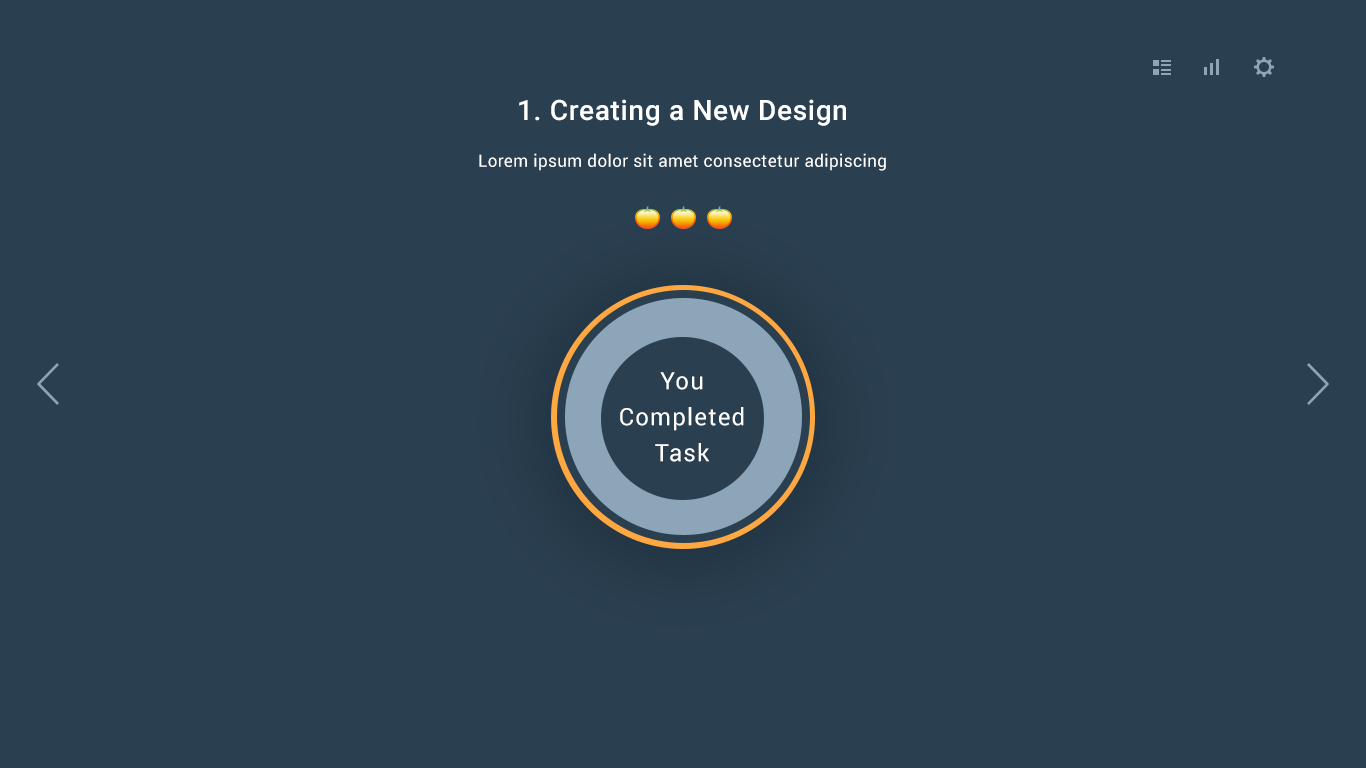
<style>
.page{position:relative;width:1366px;height:768px;background:#2a3f50}
.page>*{position:absolute;margin:0}
.t1{font:28px "Roboto-Medium";letter-spacing:0.025em;color:#ffffff}
.t2{font:17px "Roboto-Regular";letter-spacing:0.025em;color:#ffffff}
.t3{font:24px/36px "Roboto-Regular";letter-spacing:0.05em;color:#ffffff}
</style>
<div class="page">
<p class="t1" style="left:519px;top:99px;width:327px;height:27px">1. Creating a New Design</p>
<p class="t2" style="left:479px;top:153px;width:407px;height:18px">Lorem ipsum dolor sit amet consectetur adipiscing</p>
<p class="t3" style="left:620px;top:372px;width:124px;height:90px;text-align:center">You Completed Task</p>
</div>
